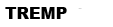
<style>
.page{position:relative;width:113px;height:27px;background:#ffffff}
.page>*{position:absolute;margin:0}
.t1{font:16px "Arial-Black";color:#000000}
</style>
<div class="page">
<p class="t1" style="left:5px;top:7px;width:62px;height:12px">TREMP</p>
</div>
